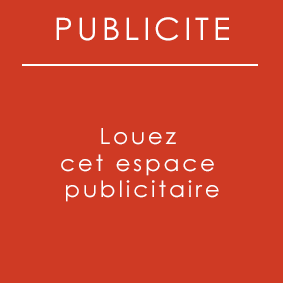
<style>
.page{position:relative;width:283px;height:283px;background:#cf3a24}
.page>*{position:absolute;margin:0}
.t1{font:30.9px "CenturyGothic";letter-spacing:0.12em;color:#ffffff;scale:1.04 1}
.t2{font:22.2px "CenturyGothic";letter-spacing:0.12em;color:#ffffff;scale:1.05 1}
</style>
<div class="page">
<p class="t1" style="left:56px;top:17px;width:173px;height:24px">PUBLICITE</p>
<p class="t2" style="left:61px;top:128px;width:158px;height:74px;text-align:center">Louez <br>cet espace <br>publicitaire</p>
</div>
